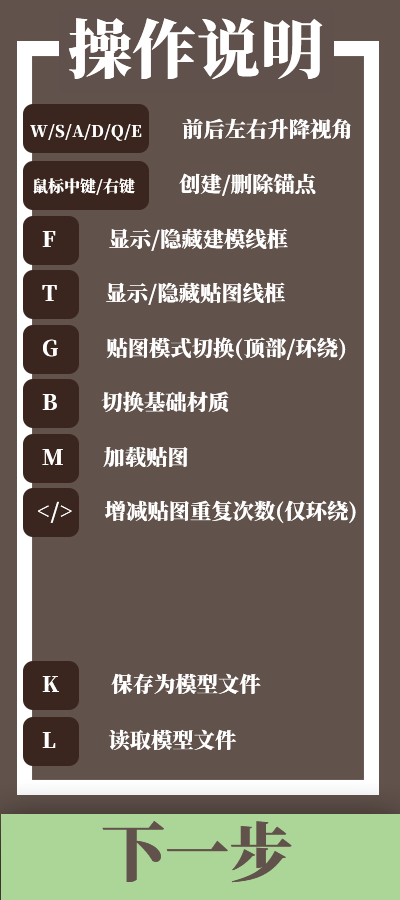
<style>
.page{position:relative;width:400px;height:900px;background:#62524c}
.page>*{position:absolute;margin:0}
.t1{font:64px "SourceHanSerifCN-Heavy";color:#ffffff}
.t2{font:16px "SourceHanSerifCN-Heavy";color:#ffffff}
.t3{font:21.3px "SourceHanSerifCN-Heavy";color:#ffffff}
.t4{font:64px "SourceHanSerifCN-Heavy";color:#62524c}
</style>
<div class="page">
<p class="t1" style="left:68px;top:18px;width:255px;height:62px">操作说明</p>
<p class="t2" style="left:30px;top:118px;width:321px;height:23px">W/S/A/D/Q/E          <span class="t3">前后左右升降视角</span></p>
<p class="t2" style="left:33px;top:173px;width:283px;height:23px">鼠标中键/右键           <span class="t3">创建/删除锚点</span></p>
<p class="t3" style="left:42px;top:228px;width:246px;height:23px">Ｆ             显示/隐藏建模线框</p>
<p class="t3" style="left:42px;top:282px;width:243px;height:23px">T            显示/隐藏贴图线框</p>
<p class="t3" style="left:43px;top:337px;width:303px;height:24px">G            贴图模式切换(顶部/环绕)</p>
<p class="t3" style="left:42px;top:391px;width:187px;height:21px">B           切换基础材质</p>
<p class="t3" style="left:42px;top:447px;width:146px;height:21px">M          加载贴图</p>
<p class="t3" style="left:38px;top:500px;width:318px;height:24px">&lt;/&gt;        增减贴图重复次数(仅环绕)</p>
<p class="t3" style="left:42px;top:673px;width:219px;height:21px">K             保存为模型文件</p>
<p class="t3" style="left:42px;top:729px;width:195px;height:21px">L             读取模型文件</p>
<p class="t4" style="left:102px;top:821px;width:190px;height:62px">下一步</p>
</div>
